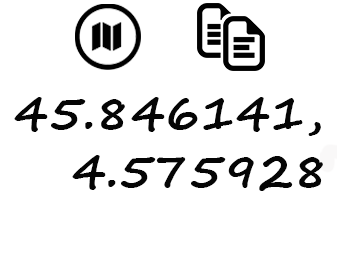
<style>
.page{position:relative;width:337px;height:260px;background:#ffffff}
.page>*{position:absolute;margin:0}
.t1{font:48px "SegoeScript-Bold";color:#050505}
</style>
<div class="page">
<p class="t1" style="left:14px;top:97px;width:309px;height:94px">45.846141, <br>   4.575928</p>
</div>
